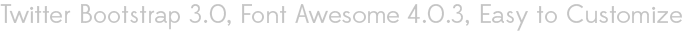
<style>
.page{position:relative;width:683px;height:31px;background:#ffffff}
.page>*{position:absolute;margin:0}
.t1{font:26px "Edmondsans-Regular";color:#c4c4c4}
</style>
<div class="page">
<p class="t1" style="left:0px;top:4px;width:682px;height:27px">Twitter Bootstrap 3.0, Font Awesome 4.0.3, Easy to Customize</p>
</div>
